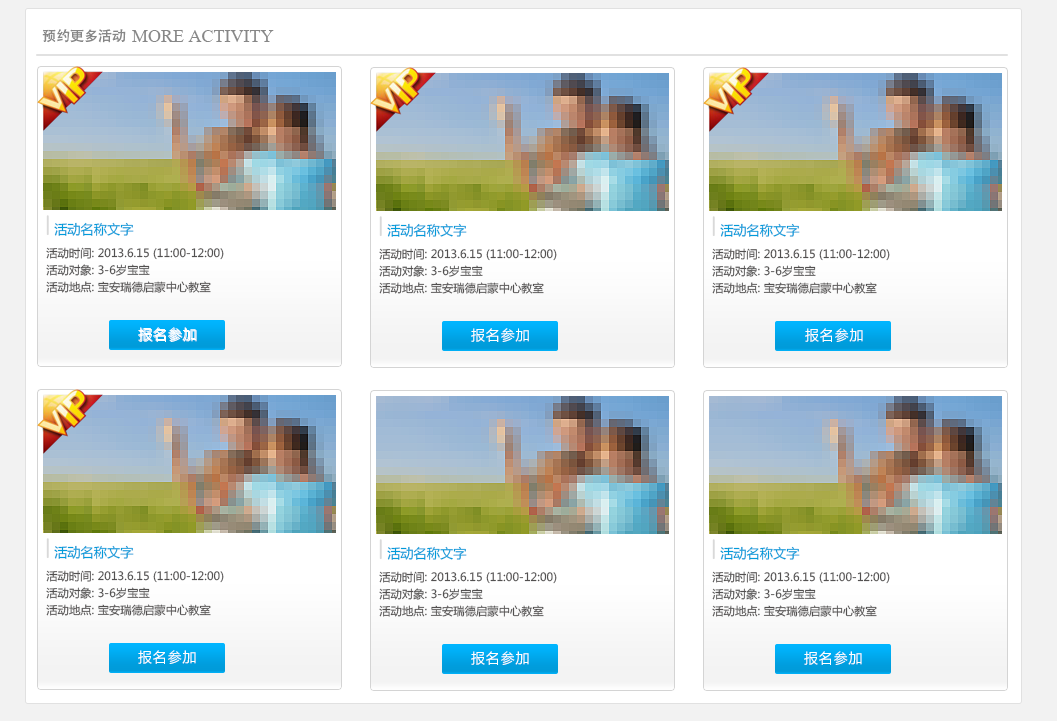
<style>
.page{position:relative;width:1057px;height:721px;background:#ffffff}
.page>*{position:absolute;margin:0}
.t1{font:14px "AdobeHeitiStd-Regular";color:#878787}
.t2{font:18px "MongolianBaiti";color:#878787}
.t3{font:13.2px "MicrosoftYaHei";color:#009bda}
.t4{font:11.3px/17px "MicrosoftYaHei";color:#525050}
.t5{font:14px "MicrosoftYaHei";letter-spacing:0.06em;color:#ffffff}
</style>
<div class="page">
<p class="t1" style="left:42px;top:29px;width:84px;height:14px">预约更多活动</p>
<p class="t2" style="left:132px;top:30px;width:142px;height:12px">MORE ACTIVITY</p>
<p class="t3" style="left:54px;top:222px;width:80px;height:14px">活动名称文字</p>
<p class="t3" style="left:387px;top:223px;width:80px;height:14px">活动名称文字</p>
<p class="t3" style="left:720px;top:223px;width:80px;height:14px">活动名称文字</p>
<p class="t4" style="left:46px;top:247px;width:178px;height:46px">活动时间: 2013.6.15 (11:00-12:00)<br>活动对象: 3-6岁宝宝<br>活动地点: 宝安瑞德启蒙中心教室</p>
<p class="t4" style="left:379px;top:248px;width:178px;height:46px">活动时间: 2013.6.15 (11:00-12:00)<br>活动对象: 3-6岁宝宝<br>活动地点: 宝安瑞德启蒙中心教室</p>
<p class="t4" style="left:712px;top:248px;width:178px;height:46px">活动时间: 2013.6.15 (11:00-12:00)<br>活动对象: 3-6岁宝宝<br>活动地点: 宝安瑞德启蒙中心教室</p>
<p class="t5" style="left:138px;top:327px;width:58px;height:14px">报名参加</p>
<p class="t5" style="left:139px;top:328px;width:58px;height:14px">报名参加</p>
<p class="t5" style="left:471px;top:328px;width:58px;height:14px">报名参加</p>
<p class="t5" style="left:805px;top:328px;width:58px;height:14px">报名参加</p>
<p class="t3" style="left:54px;top:545px;width:80px;height:14px">活动名称文字</p>
<p class="t3" style="left:387px;top:546px;width:80px;height:14px">活动名称文字</p>
<p class="t3" style="left:720px;top:546px;width:80px;height:14px">活动名称文字</p>
<p class="t4" style="left:46px;top:570px;width:178px;height:46px">活动时间: 2013.6.15 (11:00-12:00)<br>活动对象: 3-6岁宝宝<br>活动地点: 宝安瑞德启蒙中心教室</p>
<p class="t4" style="left:379px;top:571px;width:178px;height:46px">活动时间: 2013.6.15 (11:00-12:00)<br>活动对象: 3-6岁宝宝<br>活动地点: 宝安瑞德启蒙中心教室</p>
<p class="t4" style="left:712px;top:571px;width:178px;height:46px">活动时间: 2013.6.15 (11:00-12:00)<br>活动对象: 3-6岁宝宝<br>活动地点: 宝安瑞德启蒙中心教室</p>
<p class="t5" style="left:138px;top:650px;width:58px;height:14px">报名参加</p>
<p class="t5" style="left:471px;top:651px;width:58px;height:14px">报名参加</p>
<p class="t5" style="left:804px;top:651px;width:58px;height:14px">报名参加</p>
</div>
